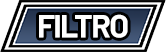
<style>
.page{position:relative;width:166px;height:52px;background:#ffffff}
.page>*{position:absolute;margin:0}
.t1{font:32px "Barlow-Bold";letter-spacing:-0.05em;color:#ffffff}
</style>
<div class="page">
<p class="t1" style="left:39px;top:14px;width:89px;height:24px">FILTRO</p>
</div>
